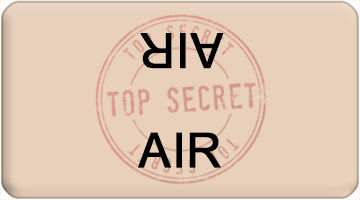
<style>
.page{position:relative;width:360px;height:200px;background:#e8d0bb}
.page>*{position:absolute;margin:0}
.t1{font:48px "ArialMT";color:#000000;font-weight:bold}
</style>
<div class="page">
<p class="t1" style="left:140px;top:33px;width:84px;height:36px;rotate:180deg">AIR</p>
<p class="t1" style="left:138px;top:132px;width:83px;height:36px">AIR</p>
</div>
